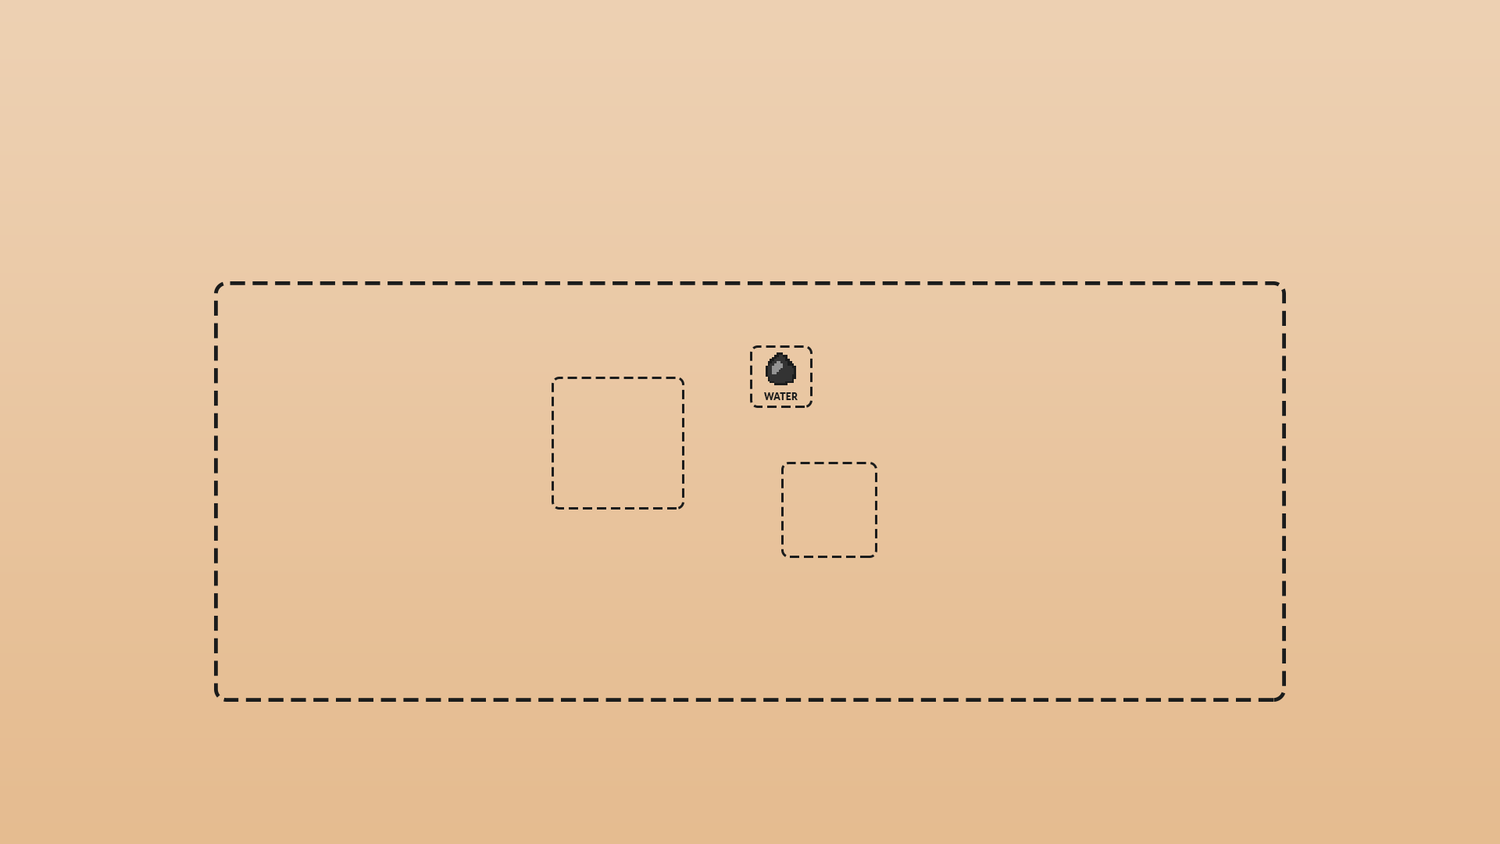
<style>
.page{position:relative;width:1500px;height:844px}
.page>*{position:absolute;margin:0}
.t1{font:9px "Lato-Black";letter-spacing:0.05em;color:#1b1c1c}
</style>
<div class="page">
<p class="t1" style="left:764px;top:392px;width:34px;height:8px">WATER</p>
</div>
